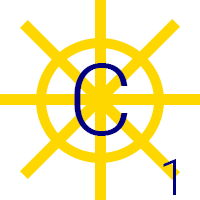
<style>
.page{position:relative;width:200px;height:200px;background:#ffffff}
.page>*{position:absolute;margin:0}
.t1{font:100px "Roboto-Light";color:#000080}
.t2{font:50px "Roboto-Light";color:#000080}
</style>
<div class="page">
<p class="t1" style="left:74px;top:63px;width:54px;height:73px">C</p>
<p class="t2" style="left:163px;top:159px;width:13px;height:36px">1</p>
</div>
